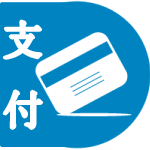
<style>
.page{position:relative;width:150px;height:150px;background:#0084c1}
.page>*{position:absolute;margin:0}
.t1{font:40px "SimSun";color:#ffffff}
</style>
<div class="page">
<p class="t1" style="left:4px;top:21px;width:38px;height:107px">支<br>付</p>
</div>
